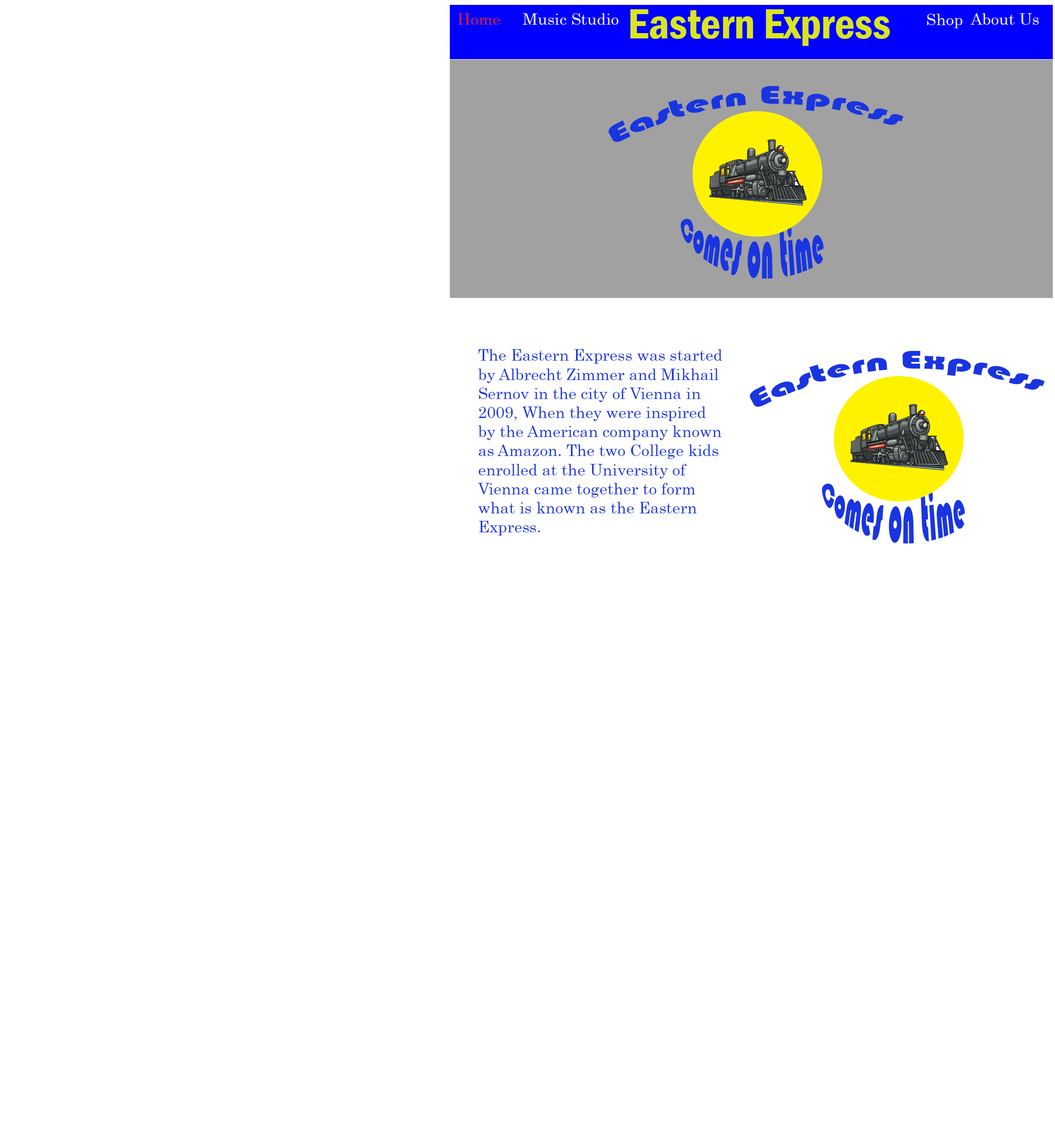
<style>
.page{position:relative;width:1055px;height:1130px;background:#ffffff}
.page>*{position:absolute;margin:0}
.t1{font:15.9px "Century";color:#d0212e}
.t2{font:15.9px "Century";color:#f7eeee}
.t3{font:43.7px "FranklinGothic-DemiCond";color:#d9e51f}
.t4{font:15.9px "Century";color:#f5eff0}
.t5{font:26.5px "Bauhaus93";color:#1935e1}
.t6{font:21.2px "Bauhaus93";color:#1935e1}
.t7{font:15.9px "Century";color:#1935e1}
</style>
<div class="page">
<p class="t1" style="left:458px;top:13px;width:42px;height:12px">Home</p>
<p class="t2" style="left:523px;top:13px;width:95px;height:12px">Music Studio</p>
<p class="t3" style="left:630px;top:9px;width:260px;height:37px">Eastern Express</p>
<p class="t2" style="left:927px;top:14px;width:35px;height:14px">Shop</p>
<p class="t4" style="left:970px;top:13px;width:69px;height:12px">About Us</p>
<p class="t5" style="left:608px;top:86px;width:296px;height:56px">Eastern Express</p>
<p class="t6" style="left:681px;top:219px;width:143px;height:60px">Comes on time</p>
<p class="t7" style="left:478px;top:349px;width:244px;height:186px">The Eastern Express was started by Albrecht Zimmer and Mikhail Sernov in the city of Vienna in 2009, When they were inspired by the American company known as Amazon. The two College kids enrolled at the University of Vienna came together to form what is known as the Eastern Express.</p>
<p class="t5" style="left:750px;top:351px;width:295px;height:56px">Eastern Express</p>
<p class="t6" style="left:822px;top:483px;width:143px;height:61px">Comes on time</p>
</div>
